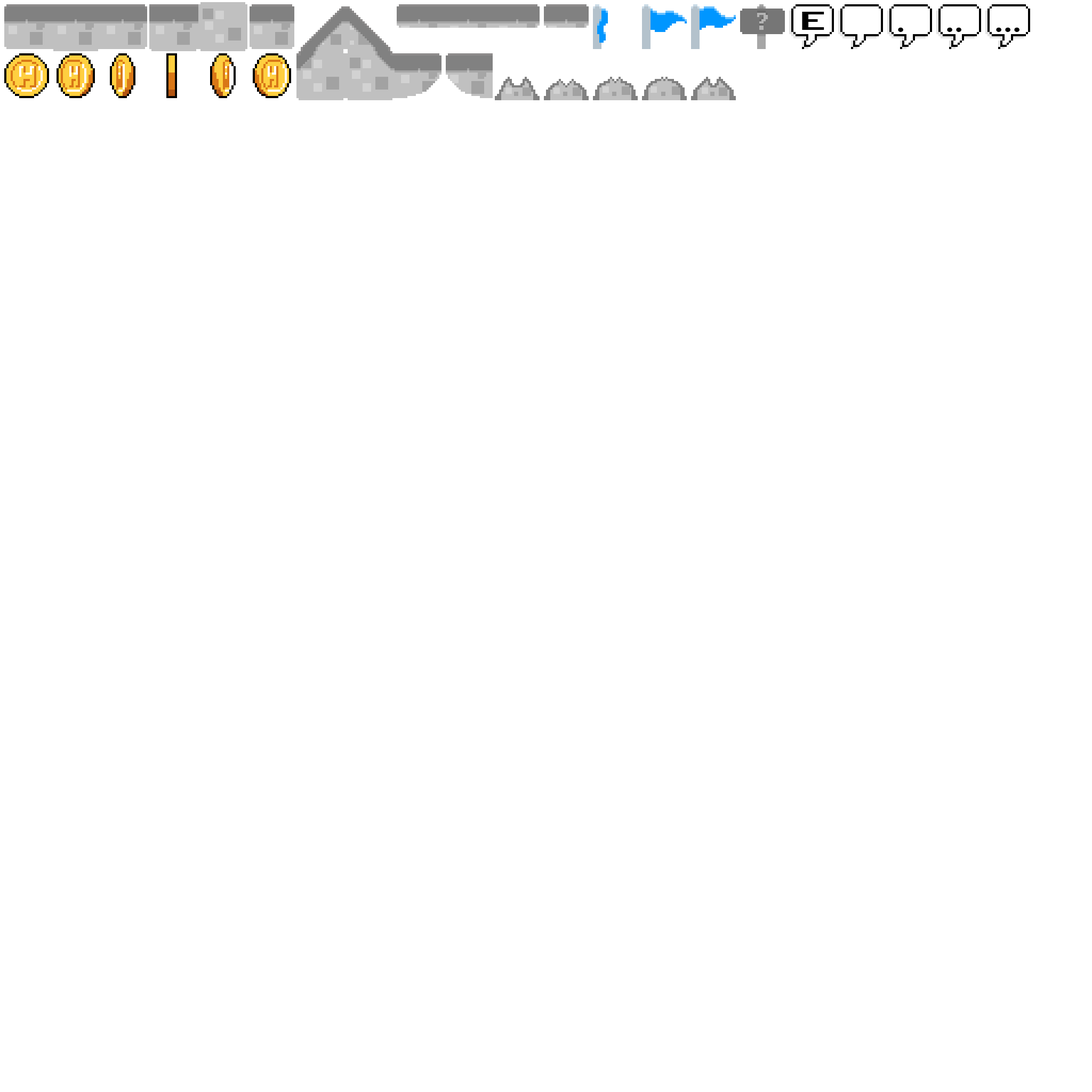
<style>
.page{position:relative;width:1092px;height:1092px;background:#ffffff}
.page>*{position:absolute;margin:0}
.t1{font:35.5px "ArcadeClassic";color:#000000;scale:1.22 1}
.t2{font:35.5px "MyriadPro-Regular";color:#000000;scale:1.22 1}
</style>
<div class="page">
<p class="t1" style="left:802px;top:12px;width:22px;height:18px">E</p>
<p class="t2" style="left:898px;top:27px;width:5px;height:5px">.</p>
<p class="t2" style="left:947px;top:27px;width:14px;height:5px">..</p>
<p class="t2" style="left:996px;top:27px;width:23px;height:5px">...</p>
</div>
